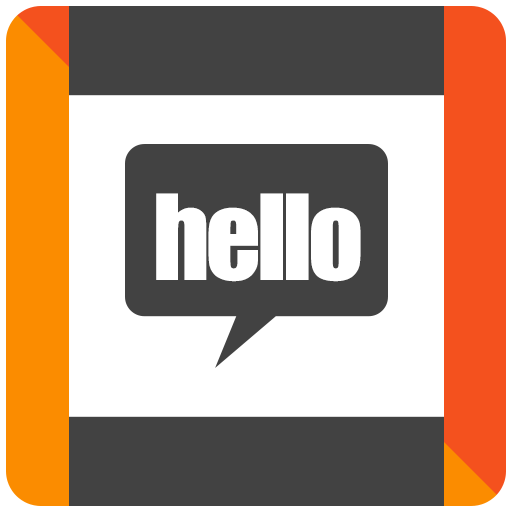
<style>
.page{position:relative;width:512px;height:512px;background:#ffffff}
.page>*{position:absolute;margin:0}
.t1{font:109px "Impact";letter-spacing:-0.04em;color:#ffffff}
</style>
<div class="page">
<p class="t1" style="left:156px;top:193px;width:205px;height:89px">hello</p>
</div>
